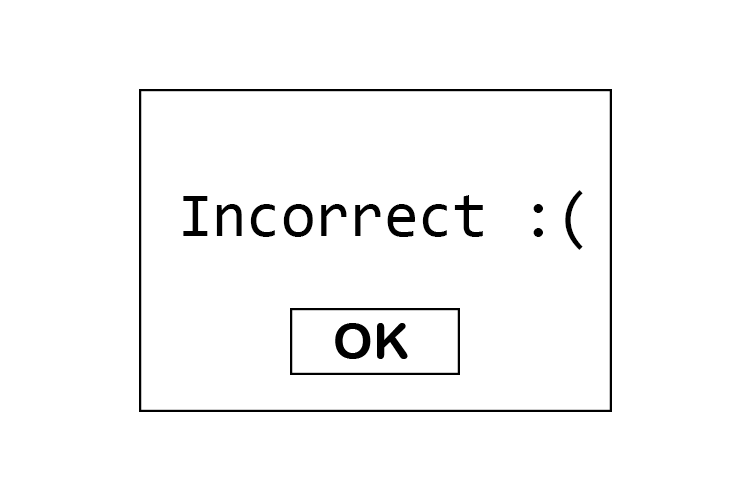
<style>
.page{position:relative;width:750px;height:500px;background:#ffffff}
.page>*{position:absolute;margin:0}
.t1{font:62.5px "Consolas";color:#000000}
</style>
<div class="page">
<p class="t1" style="left:183px;top:190px;width:400px;height:60px">Incorrect :(</p>
</div>
